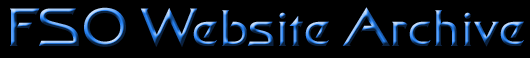
<style>
.page{position:relative;width:530px;height:58px;background:#000000}
.page>*{position:absolute;margin:0}
.t1{font:54px "FinalFrontier"}
</style>
<div class="page">
<p class="t1" style="left:10px;top:7px;width:514px;height:40px">FSO Website Archive</p>
</div>
